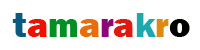
<style>
.page{position:relative;width:200px;height:50px;background:#ffffff}
.page>*{position:absolute;margin:0}
.t1{font:36px "FranklinGothic-Heavy";color:#085a80}
.t2{font:36px "FranklinGothic-Heavy";color:#ef1100}
.t3{font:36px "FranklinGothic-Heavy";color:#009122}
.t4{font:36px "FranklinGothic-Heavy";color:#e96e0a}
.t5{font:36px "FranklinGothic-Heavy";color:#8c0774}
.t6{font:36px "FranklinGothic-Heavy";color:#df190f}
.t7{font:36px "FranklinGothic-Heavy";color:#1ea8ad}
.t8{font:36px "FranklinGothic-Heavy";color:#df890f}
.t9{font:36px "FranklinGothic-Heavy";color:#010100}
</style>
<div class="page">
<p class="t1" style="left:12px;top:13px;width:178px;height:24px">t<span class="t2">a</span><span class="t3">m</span><span class="t4">a</span><span class="t5">r</span><span class="t6">a</span><span class="t7">k</span><span class="t8">r</span><span class="t9">o</span></p>
</div>
